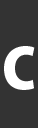
<style>
.page{position:relative;width:38px;height:128px;background:#333333}
.page>*{position:absolute;margin:0}
.t1{font:75px "AdobeGothicStd-Bold";color:#ffffff}
</style>
<div class="page">
<p class="t1" style="left:4px;top:46px;width:31px;height:44px">c</p>
</div>
